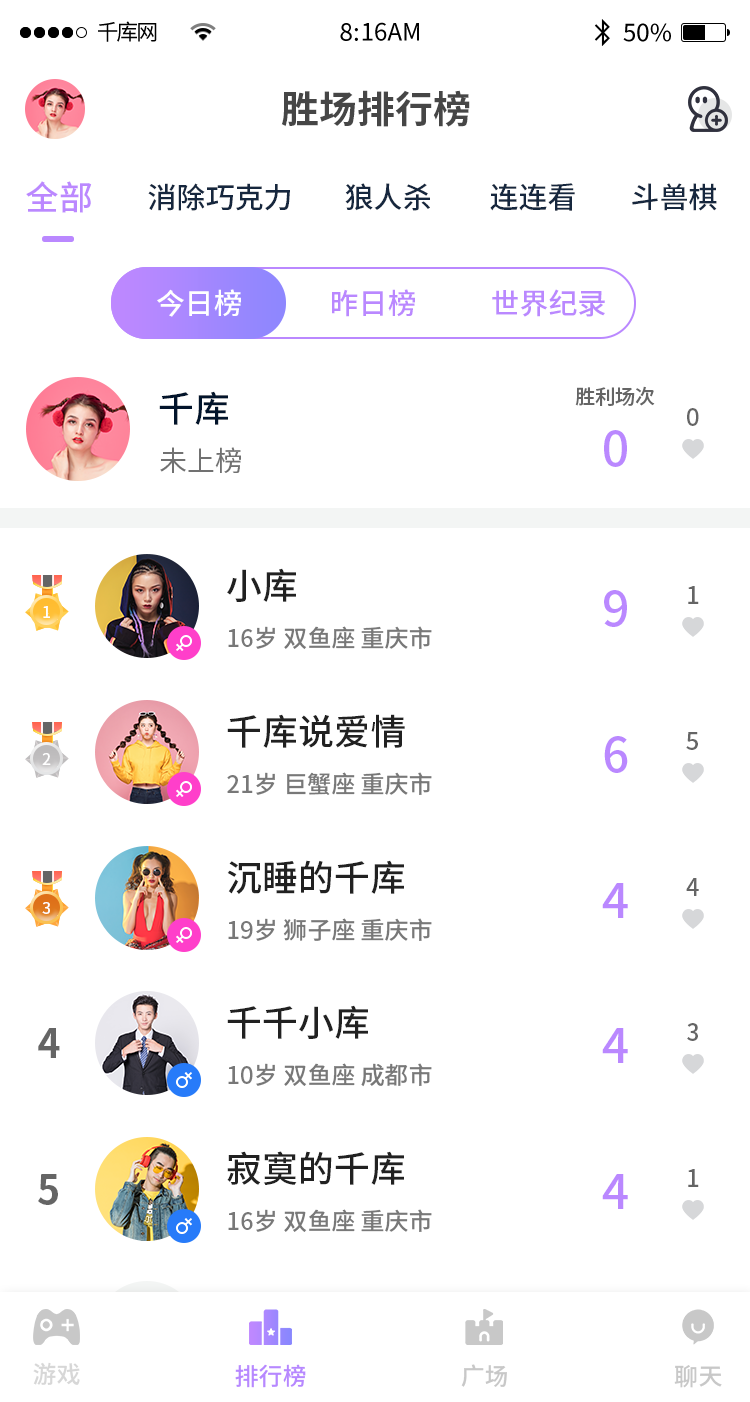
<style>
.page{position:relative;width:750px;height:1402px;background:#ffffff}
.page>*{position:absolute;margin:0}
.t1{font:38px "SourceHanSansCN-Bold";color:#464646}
.t2{font:34px "SourceHanSansCN-Medium";color:#bb88ff}
.t3{font:29px "SourceHanSansCN-Medium";color:#16273e}
.t4{font:29px "SourceHanSansCN-Medium";color:#ffffff}
.t5{font:29px "SourceHanSansCN-Medium";color:#ba88ff}
.t6{font:20px "SourceHanSansCN-Medium";color:#656565}
.t7{font:36px "SourceHanSansCN-Medium";color:#02142b}
.t8{font:24px "SourceHanSansCN-Medium";color:#656565}
.t9{font:48px "SourceHanSansCN-Medium";color:#ba88ff}
.t10{font:28px "SourceHanSansCN-Regular";color:#717171}
.t11{font:36px "SourceHanSansCN-Medium";color:#212121}
.t12{font:16px "SourceHanSansCN-Medium";color:#ffffff}
.t13{font:24px "SourceHanSansCN-Medium";color:#787878}
.t14{font:40px "SourceHanSansCN-Bold";color:#656565}
.t15{font:24px "SourceHanSansCN-Medium";color:#d7d7d7}
.t16{font:24px "SourceHanSansCN-Medium";color:#b788ff}
.t17{font:24px "SourceHanSansCN-Medium";color:#c8c8c8}
</style>
<div class="page">
<p class="t1" style="left:281px;top:90px;width:189px;height:37px">胜场排行榜</p>
<p class="t2" style="left:26px;top:181px;width:66px;height:32px">全部</p>
<p class="t3" style="left:148px;top:183px;width:142px;height:28px">消除巧克力</p>
<p class="t3" style="left:345px;top:183px;width:85px;height:28px">狼人杀</p>
<p class="t3" style="left:490px;top:183px;width:85px;height:28px">连连看</p>
<p class="t3" style="left:632px;top:183px;width:85px;height:28px">斗兽棋</p>
<p class="t4" style="left:157px;top:289px;width:84px;height:28px">今日榜</p>
<p class="t5" style="left:332px;top:289px;width:83px;height:28px">昨日榜</p>
<p class="t5" style="left:492px;top:289px;width:113px;height:28px">世界纪录</p>
<p class="t6" style="left:575px;top:386px;width:80px;height:20px">胜利场次</p>
<p class="t7" style="left:159px;top:391px;width:69px;height:34px">千库</p>
<p class="t8" style="left:687px;top:408px;width:12px;height:18px">0</p>
<p class="t9" style="left:604px;top:430px;width:23px;height:37px">0</p>
<p class="t10" style="left:160px;top:447px;width:81px;height:26px">未上榜</p>
<p class="t11" style="left:227px;top:568px;width:69px;height:34px">小库</p>
<p class="t9" style="left:604px;top:590px;width:23px;height:37px">9</p>
<p class="t8" style="left:688px;top:586px;width:11px;height:18px">1</p>
<p class="t12" style="left:43px;top:606px;width:7px;height:12px">1</p>
<p class="t13" style="left:228px;top:626px;width:204px;height:23px">16岁 双鱼座 重庆市</p>
<p class="t11" style="left:227px;top:714px;width:178px;height:34px">千库说爱情</p>
<p class="t9" style="left:604px;top:736px;width:24px;height:37px">6</p>
<p class="t8" style="left:686px;top:732px;width:12px;height:18px">5</p>
<p class="t12" style="left:42px;top:753px;width:9px;height:12px">2</p>
<p class="t13" style="left:227px;top:772px;width:205px;height:23px">21岁 巨蟹座 重庆市</p>
<p class="t11" style="left:227px;top:860px;width:177px;height:34px">沉睡的千库</p>
<p class="t8" style="left:686px;top:878px;width:13px;height:18px">4</p>
<p class="t9" style="left:602px;top:883px;width:26px;height:35px">4</p>
<p class="t12" style="left:42px;top:902px;width:8px;height:12px">3</p>
<p class="t13" style="left:228px;top:918px;width:204px;height:23px">19岁 狮子座 重庆市</p>
<p class="t11" style="left:227px;top:1005px;width:141px;height:34px">千千小库</p>
<p class="t8" style="left:687px;top:1023px;width:11px;height:18px">3</p>
<p class="t14" style="left:38px;top:1028px;width:22px;height:30px">4</p>
<p class="t9" style="left:602px;top:1028px;width:26px;height:35px">4</p>
<p class="t13" style="left:228px;top:1063px;width:204px;height:24px">10岁 双鱼座 成都市</p>
<p class="t11" style="left:227px;top:1151px;width:177px;height:34px">寂寞的千库</p>
<p class="t8" style="left:688px;top:1169px;width:11px;height:18px">1</p>
<p class="t14" style="left:38px;top:1174px;width:20px;height:31px">5</p>
<p class="t9" style="left:602px;top:1174px;width:26px;height:35px">4</p>
<p class="t13" style="left:228px;top:1209px;width:204px;height:23px">16岁 双鱼座 重庆市</p>
<p class="t15" style="left:33px;top:1362px;width:47px;height:23px">游戏</p>
<p class="t16" style="left:235px;top:1364px;width:71px;height:24px">排行榜</p>
<p class="t17" style="left:461px;top:1364px;width:46px;height:23px">广场</p>
<p class="t17" style="left:674px;top:1365px;width:48px;height:23px">聊天</p>
</div>
